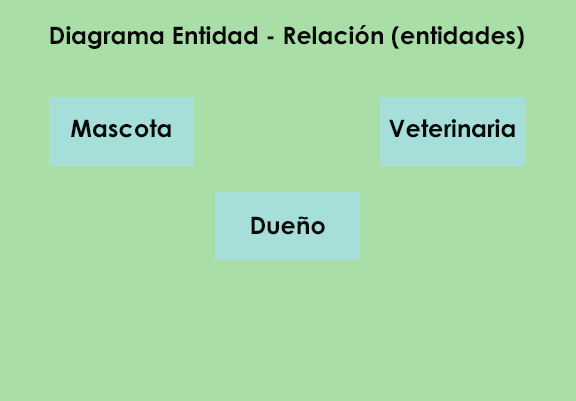
<style>
.page{position:relative;width:576px;height:401px;background:#a9dea6}
.page>*{position:absolute;margin:0}
.t1{font:24px "CenturyGothic-Bold";color:#080808}
</style>
<div class="page">
<p class="t1" style="left:50px;top:25px;width:474px;height:24px">Diagrama Entidad - Relación (entidades)</p>
<p class="t1" style="left:71px;top:119px;width:100px;height:19px">Mascota</p>
<p class="t1" style="left:389px;top:119px;width:126px;height:19px">Veterinaria</p>
<p class="t1" style="left:251px;top:216px;width:74px;height:19px">Dueño</p>
</div>
